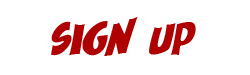
<style>
.page{position:relative;width:250px;height:75px;background:#ffffff}
.page>*{position:absolute;margin:0}
.t1{font:50px "HoustonComicsPersonalUse";color:#af0101}
</style>
<div class="page">
<p class="t1" style="left:51px;top:17px;width:145px;height:39px">SIGN UP</p>
</div>
